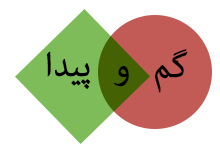
<style>
.page{position:relative;width:220px;height:160px;background:#ffffff}
.page>*{position:absolute;margin:0}
.t1{font:48px "AdobeArabic-Regular";color:#000000;font-variant:small-caps;font-weight:bold;scale:0.96 1}
</style>
<div class="page">
<p class="t1" style="left:47px;top:51px;width:44px;height:38px">پیدا</p>
<p class="t1" style="left:155px;top:49px;width:33px;height:44px">گم</p>
<p class="t1" style="left:114px;top:66px;width:15px;height:21px">و</p>
</div>
